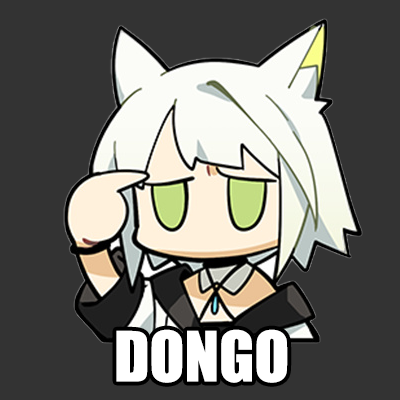
<style>
.page{position:relative;width:400px;height:400px;background:#333333}
.page>*{position:absolute;margin:0}
.t1{font:64px "Impact";color:#ffffff}
</style>
<div class="page">
<p class="t1" style="left:116px;top:329px;width:172px;height:54px">DONGO</p>
</div>
